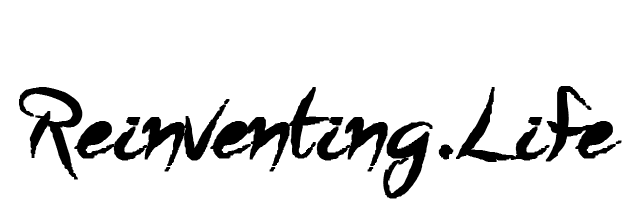
<style>
.page{position:relative;width:640px;height:200px;background:#ffffff}
.page>*{position:absolute;margin:0}
.t1{font:100px "A-Quiet-Sleep";color:#000000;font-weight:bold}
</style>
<div class="page">
<p class="t1" style="left:19px;top:86px;width:603px;height:113px">Reinventing.Life</p>
</div>
